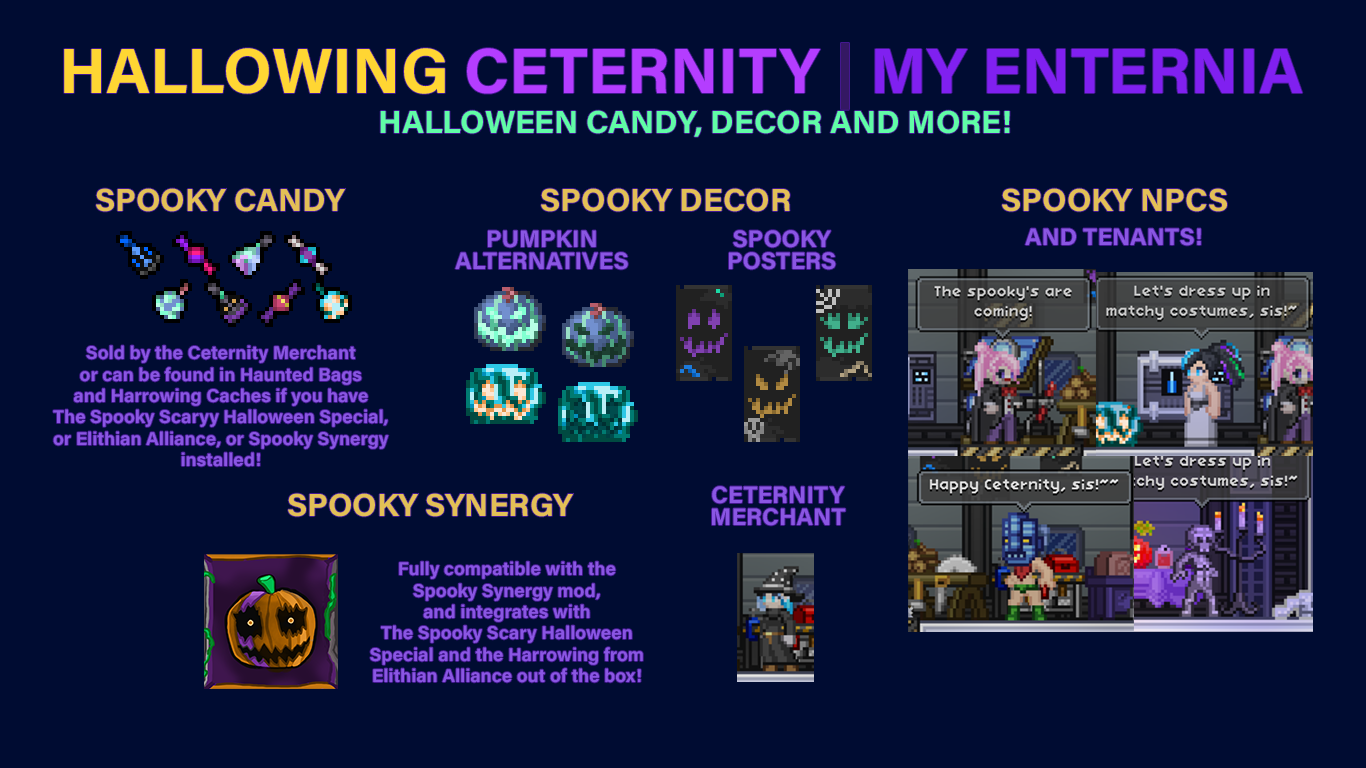
<style>
.page{position:relative;width:1366px;height:768px;background:#000c32}
.page>*{position:absolute;margin:0}
.t1{font:64px "AcuminConcept-Bold";color:#8020f0}
.t2{font:64px "AcuminConcept-Bold";color:#ffd633}
.t3{font:64px "AcuminConcept-Bold";color:#b43dff}
.t4{font:64px "AcuminConcept-Bold";color:#341863}
.t5{font:32px "AcuminConcept-Bold";color:#60fca6}
.t6{font:32px "AcuminConcept-Bold";color:#e3c056}
.t7{font:24px/21.3px "AcuminConcept-Bold";color:#8a56e3}
.t8{font:24px "AcuminConcept-Bold";color:#8a56e3}
.t9{font:18.7px/21.3px "AcuminConcept-Bold";color:#8a56e3}
</style>
<div class="page">
<p class="t1" style="left:64px;top:43px;width:1239px;height:67px"><span class="t2">HALLOWING </span><span class="t3">CETERNITY </span><span class="t4">| </span>MY ENTERNIA</p>
<p class="t5" style="left:380px;top:110px;width:630px;height:27px">HALLOWEEN CANDY, DECOR AND MORE!</p>
<p class="t6" style="left:96px;top:188px;width:250px;height:24px">SPOOKY CANDY</p>
<p class="t6" style="left:541px;top:188px;width:249px;height:24px">SPOOKY DECOR</p>
<p class="t6" style="left:1002px;top:188px;width:225px;height:24px">SPOOKY NPCS</p>
<p class="t7" style="left:455px;top:230px;width:173px;height:40px;text-align:center">PUMPKIN<br>ALTERNATIVES</p>
<p class="t7" style="left:729px;top:230px;width:107px;height:40px;text-align:center">SPOOKY<br>POSTERS</p>
<p class="t8" style="left:1025px;top:228px;width:176px;height:18px">AND TENANTS!</p>
<p class="t9" style="left:53px;top:345px;width:336px;height:122px;text-align:center">Sold by the Ceternity Merchant<br>or can be found in Haunted Bags<br>and Harrowing Caches if you have<br>The Spooky Scaryy Halloween Special,<br>or Elithian Alliance, or Spooky Synergy<br>installed!</p>
<p class="t7" style="left:712px;top:486px;width:134px;height:40px;text-align:center">CETERNITY<br>MERCHANT</p>
<p class="t6" style="left:288px;top:493px;width:286px;height:24px">SPOOKY SYNERGY</p>
<p class="t9" style="left:370px;top:561px;width:273px;height:122px;text-align:center">Fully compatible with the<br>Spooky Synergy mod,<br>and integrates with<br>The Spooky Scary Halloween<br>Special and the Harrowing from<br>Elithian Alliance out of the box!</p>
</div>
